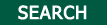
<style>
.page{position:relative;width:107px;height:25px;background:#005941}
.page>*{position:absolute;margin:0}
.t1{font:18px "Tahoma";letter-spacing:0.02em;color:#ffffff;font-weight:bold}
</style>
<div class="page">
<p class="t1" style="left:18px;top:5px;width:69px;height:15px">SEARCH</p>
</div>
